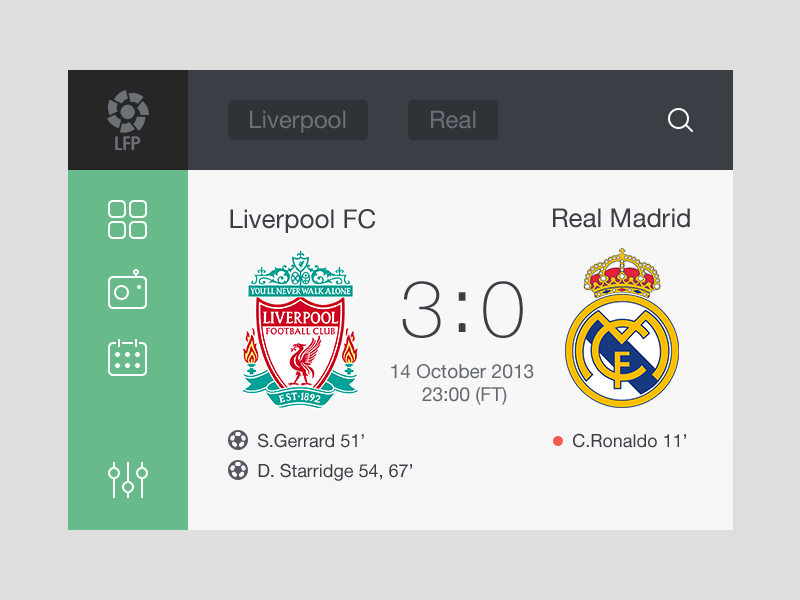
<style>
.page{position:relative;width:800px;height:600px;background:#dedede}
.page>*{position:absolute;margin:0}
.t1{font:24px "HelveticaNeue";color:#6c7177}
.t2{font:26px "HelveticaNeue";color:#3b3e45}
.t3{font:79.2px "HelveticaNeue-Thin";color:#3b3e45}
.t4{font:79.2px "HelveticaNeue-Light";color:#3b3e45}
.t5{font:19.2px "HelveticaNeue";color:#656971}
.t6{font:18px "HelveticaNeue";color:#3b3e45}
</style>
<div class="page">
<p class="t1" style="left:250px;top:110px;width:96px;height:23px">Liverpool</p>
<p class="t1" style="left:431px;top:110px;width:45px;height:19px">Real</p>
<p class="t2" style="left:230px;top:209px;width:146px;height:24px">Liverpool FC</p>
<p class="t2" style="left:553px;top:208px;width:137px;height:20px">Real Madrid</p>
<p class="t3" style="left:402px;top:281px;width:39px;height:57px">3</p>
<p class="t3" style="left:483px;top:281px;width:40px;height:57px">0</p>
<p class="t4" style="left:458px;top:292px;width:8px;height:40px">:</p>
<p class="t5" style="left:391px;top:364px;width:143px;height:41px;text-align:center">14 October 2013 <br>23:00 (FT)</p>
<p class="t6" style="left:258px;top:433px;width:106px;height:15px">S.Gerrard 51’</p>
<p class="t6" style="left:573px;top:433px;width:113px;height:15px">C.Ronaldo 11’</p>
<p class="t6" style="left:258px;top:463px;width:154px;height:18px">D. Starridge 54, 67’</p>
</div>
